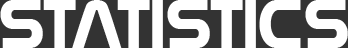
<style>
.page{position:relative;width:348px;height:48px;background:#ffffff}
.page>*{position:absolute;margin:0}
.t1{font:72px "Nasalization";color:#ffffff}
</style>
<div class="page">
<p class="t1" style="left:0px;top:0px;width:348px;height:48px">STATISTICS</p>
</div>
